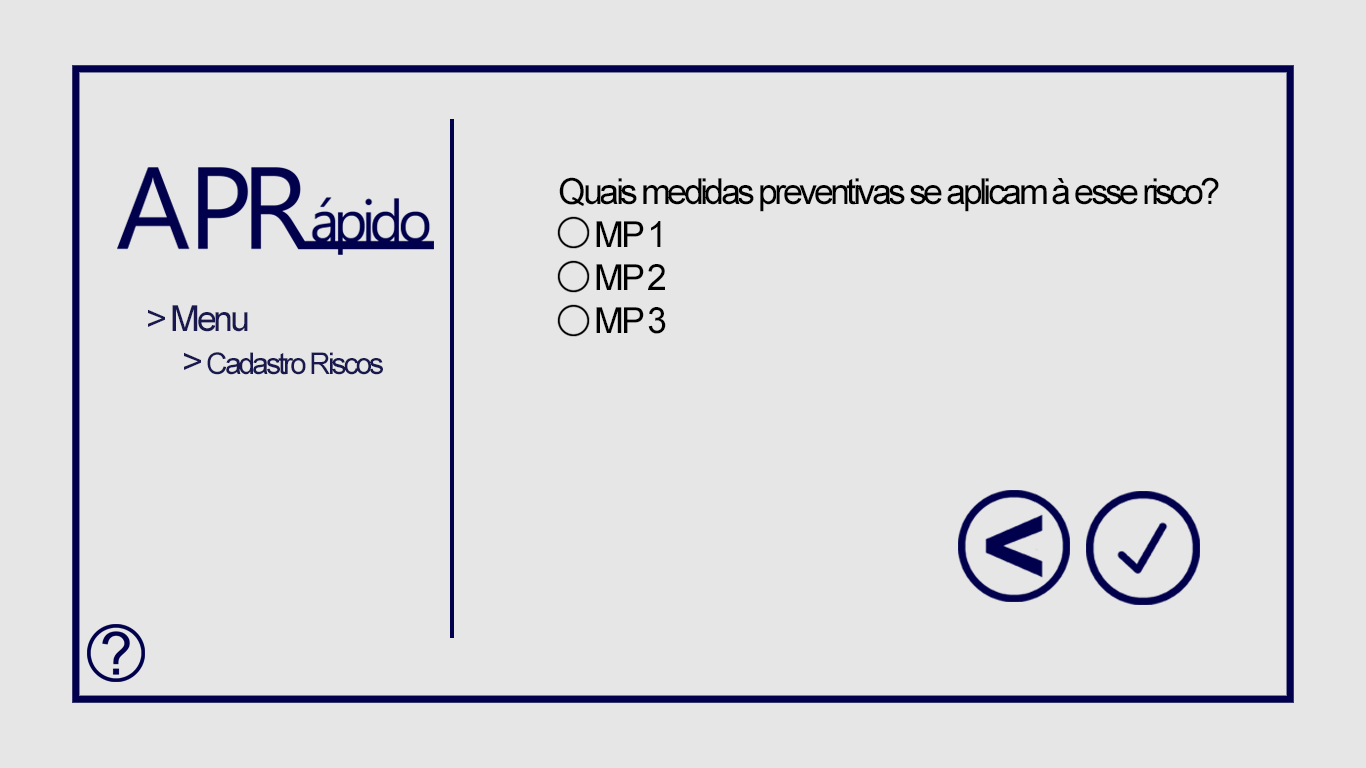
<style>
.page{position:relative;width:1366px;height:768px;background:#e6e6e6}
.page>*{position:absolute;margin:0}
.t1{font:36px "ArialMT";letter-spacing:-0.1em;color:#000000}
.t2{font:30px "ArialMT";letter-spacing:-0.1em;color:#19194f}
.t3{font:36px "ArialMT";letter-spacing:-0.095em;color:#19194f}
</style>
<div class="page">
<p class="t1" style="left:559px;top:177px;width:660px;height:157px">Quais medidas preventivas se aplicam à esse risco?<br> MP 1<br> MP 2<br> MP 3</p>
<p class="t2" style="left:148px;top:305px;width:235px;height:70px"><span class="t3">&gt; Menu<br> &gt; </span>Cadastro Riscos</p>
</div>
